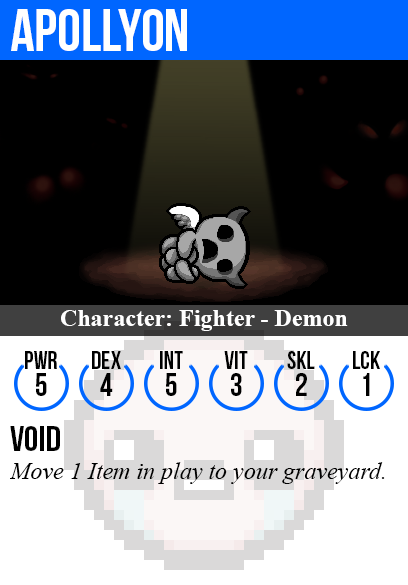
<style>
.page{position:relative;width:408px;height:585px;background:#000000}
.page>*{position:absolute;margin:0}
.t1{font:60px "BebasNeue";color:#ffffff}
.t2{font:24px "TimesNewRomanPS-BoldMT";color:#ffffff}
.t3{font:25px "BebasNeue";color:#000000}
.t4{font:32px "BebasNeue";color:#000000}
.t5{font:36px "BebasNeue";color:#000000}
.t6{font:24px "TimesNewRomanPS-ItalicMT";color:#000000}
</style>
<div class="page">
<p class="t1" style="left:11px;top:9px;width:176px;height:42px">apollyon</p>
<p class="t2" style="left:61px;top:310px;width:287px;height:21px">Character: Fighter - Demon</p>
<p class="t3" style="left:25px;top:351px;width:32px;height:18px">PWR</p>
<p class="t3" style="left:92px;top:351px;width:29px;height:18px">dex</p>
<p class="t3" style="left:160px;top:351px;width:23px;height:18px">int</p>
<p class="t3" style="left:224px;top:351px;width:24px;height:18px">vit</p>
<p class="t3" style="left:287px;top:351px;width:28px;height:18px">skl</p>
<p class="t3" style="left:353px;top:351px;width:27px;height:18px">lck</p>
<p class="t4" style="left:36px;top:373px;width:11px;height:23px">5</p>
<p class="t4" style="left:100px;top:373px;width:13px;height:23px">4</p>
<p class="t4" style="left:166px;top:373px;width:11px;height:23px">5</p>
<p class="t4" style="left:231px;top:373px;width:11px;height:23px">3</p>
<p class="t4" style="left:296px;top:373px;width:11px;height:23px">2</p>
<p class="t4" style="left:363px;top:373px;width:7px;height:23px">1</p>
<p class="t5" style="left:10px;top:426px;width:50px;height:25px">void</p>
<p class="t6" style="left:10px;top:462px;width:375px;height:22px">Move 1 Item in play to your graveyard.</p>
</div>
